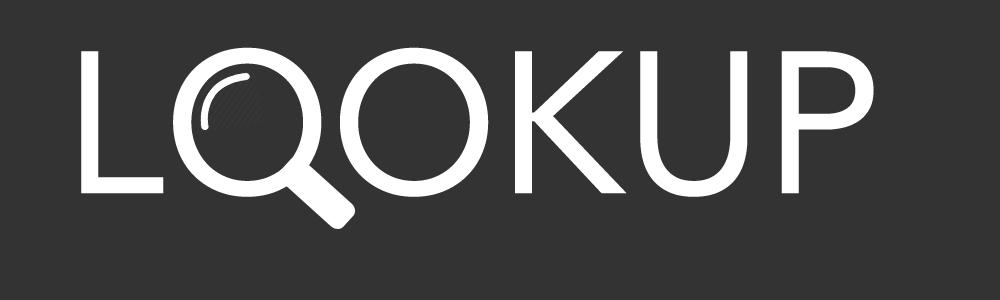
<style>
.page{position:relative;width:1000px;height:300px;background:#333333}
.page>*{position:absolute;margin:0}
.t1{font:200px "Avenir-Roman";color:#ffffff}
</style>
<div class="page">
<p class="t1" style="left:81px;top:47px;width:793px;height:150px">LOOKUP</p>
</div>
